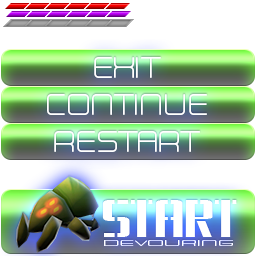
<style>
.page{position:relative;width:256px;height:256px;background:#ffffff}
.page>*{position:absolute;margin:0}
.t1{font:26.3px "Neogrey";color:#ffffff}
.t2{font:62.6px "DSArmyCyr";color:#ffffff}
.t3{font:6.5px "Neogrey";color:#ffffff;scale:2.89 1}
</style>
<div class="page">
<p class="t1" style="left:94px;top:57px;width:67px;height:21px">EXIT</p>
<p class="t1" style="left:47px;top:94px;width:160px;height:21px">CONTINUE</p>
<p class="t1" style="left:54px;top:131px;width:147px;height:21px">RESTART</p>
<p class="t2" style="left:102px;top:200px;width:135px;height:37px">START</p>
<p class="t3" style="left:104px;top:240px;width:129px;height:6px">DEVOURING</p>
</div>
